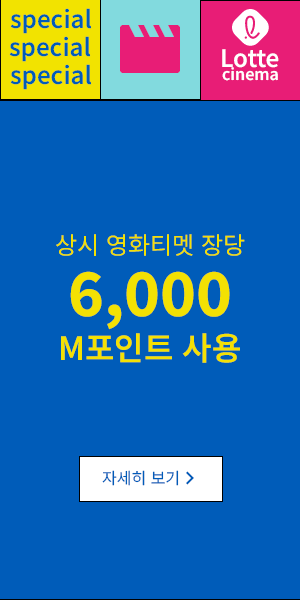
<style>
.page{position:relative;width:300px;height:600px;background:#005cb9}
.page>*{position:absolute;margin:0}
.t1{font:24px "NotoSansKR-SemiBold";color:#005cb9}
.t2{font:24px "NotoSansKR-SemiBold";color:#ffffff}
.t3{font:16px "NotoSansKR-SemiBold";color:#ffffff}
.t4{font:24px "NotoSansKR-Regular";color:#f3e103}
.t5{font:60px "NotoSansKR-ExtraBold";color:#f3e103}
.t6{font:32px "NotoSansKR-SemiBold";color:#f3e103}
.t7{font:16px "NotoSansKR-Regular";color:#005cb9}
</style>
<div class="page">
<p class="t1" style="left:10px;top:8px;width:82px;height:26px">special</p>
<p class="t1" style="left:9px;top:36px;width:82px;height:26px">special</p>
<p class="t2" style="left:222px;top:49px;width:57px;height:19px">Lotte</p>
<p class="t1" style="left:10px;top:64px;width:82px;height:26px">special</p>
<p class="t3" style="left:222px;top:67px;width:56px;height:14px">cinema</p>
<p class="t4" style="left:56px;top:234px;width:189px;height:22px">상시 영화티멧 장당</p>
<p class="t5" style="left:70px;top:271px;width:160px;height:59px">6,000</p>
<p class="t6" style="left:61px;top:333px;width:179px;height:30px">M포인트 사용</p>
<p class="t7" style="left:102px;top:470px;width:77px;height:16px">자세히 보기</p>
</div>
